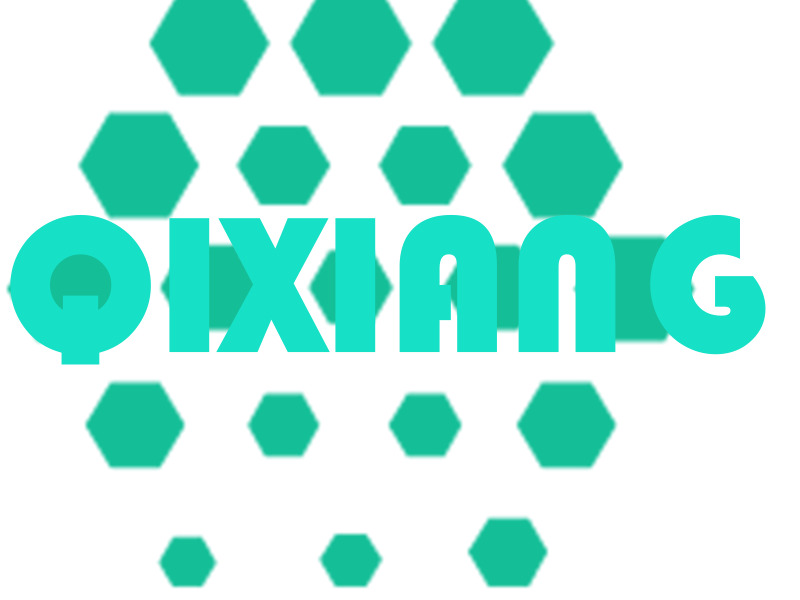
<style>
.page{position:relative;width:800px;height:600px;background:#ffffff}
.page>*{position:absolute;margin:0}
.t1{font:200.6px "STHupo";color:#16e0c6}
.t2{font:138px "STHupo";color:#ccff00}
</style>
<div class="page">
<p class="t1" style="left:10px;top:214px;width:756px;height:151px"><span class="t2"><br></span>QIXIANG</p>
</div>
